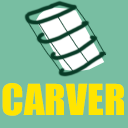
<style>
.page{position:relative;width:128px;height:128px;background:#78bea2}
.page>*{position:absolute;margin:0}
.t1{font:39.6px "Impact";color:#ffe500}
</style>
<div class="page">
<p class="t1" style="left:2px;top:83px;width:122px;height:33px">CARVER</p>
</div>
